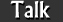
<style>
.page{position:relative;width:63px;height:22px;background:#333333}
.page>*{position:absolute;margin:0}
.t1{font:24px "Narkisim";color:#ffffff}
</style>
<div class="page">
<p class="t1" style="left:10px;top:0px;width:40px;height:18px">Talk</p>
</div>
